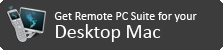
<style>
.page{position:relative;width:223px;height:50px;background:#3c3c3c}
.page>*{position:absolute;margin:0}
.t1{font:12px "Calibri";color:#ffffff}
.t2{font:20px "Calibri";color:#ffffff}
</style>
<div class="page">
<p class="t1" style="left:54px;top:12px;width:143px;height:10px">Get Remote PC Suite for your</p>
<p class="t2" style="left:56px;top:24px;width:105px;height:18px">Desktop Mac</p>
</div>
